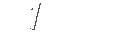
<style>
.page{position:relative;width:128px;height:32px;background:#ffffff}
.page>*{position:absolute;margin:0}
.t1{font:43px "DomDiagonalBT-Regular";letter-spacing:0.075em;color:#ffffff;scale:1.05 1}
</style>
<div class="page">
<p class="t1" style="left:30px;top:2px;width:11px;height:28px">1</p>
</div>
